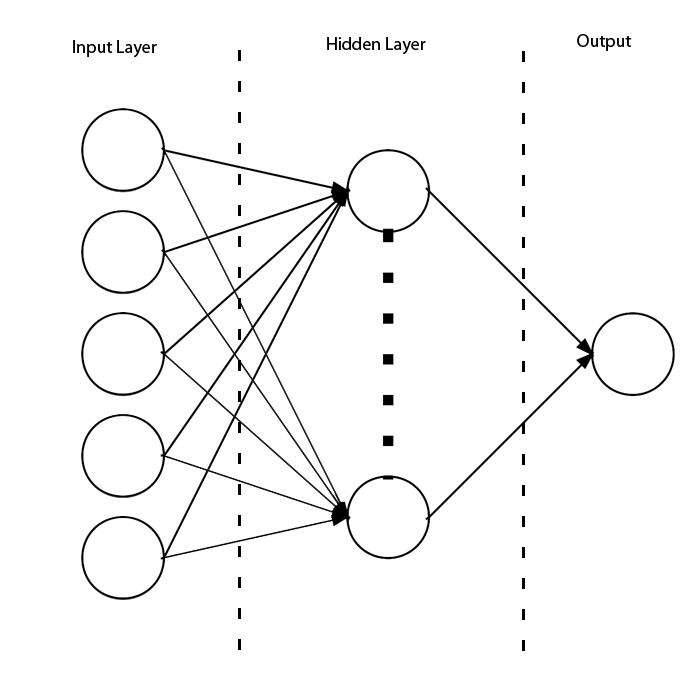
<style>
.page{position:relative;width:700px;height:700px;background:#ffffff}
.page>*{position:absolute;margin:0}
.t1{font:18px "MyriadPro-Regular";color:#000000}
</style>
<div class="page">
<p class="t1" style="left:73px;top:40px;width:84px;height:18px">Input Layer</p>
<p class="t1" style="left:327px;top:37px;width:99px;height:18px">Hidden Layer</p>
<p class="t1" style="left:577px;top:34px;width:55px;height:17px">Output</p>
</div>
